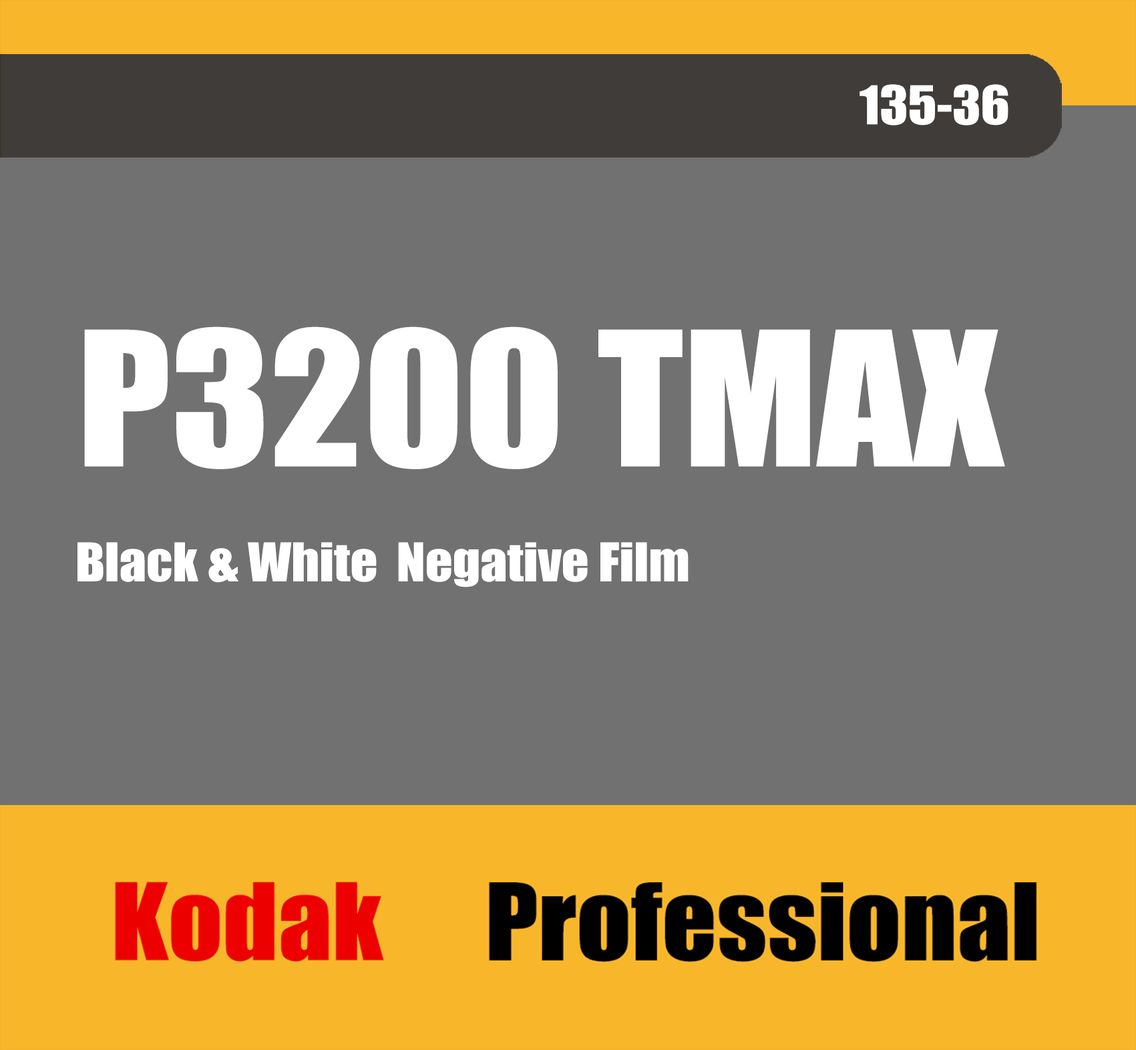
<style>
.page{position:relative;width:1136px;height:1050px;background:#717171}
.page>*{position:absolute;margin:0}
.t1{font:49.4px "Impact";color:#ffffff;scale:1.08 1}
.t2{font:172.8px "Impact";color:#ffffff;scale:1.08 1}
</style>
<div class="page">
<p class="t1" style="left:859px;top:84px;width:149px;height:42px">135-36</p>
<p class="t2" style="left:84px;top:326px;width:921px;height:143px">P3200 TMAX</p>
<p class="t1" style="left:77px;top:542px;width:611px;height:45px">Black &amp; White  Negative Film</p>
</div>
